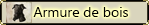
<style>
.page{position:relative;width:149px;height:25px;background:#d9d5bd}
.page>*{position:absolute;margin:0}
.t1{font:14px "LaoUI";color:#000000}
</style>
<div class="page">
<p class="t1" style="left:33px;top:7px;width:95px;height:10px">Armure de bois</p>
</div>
